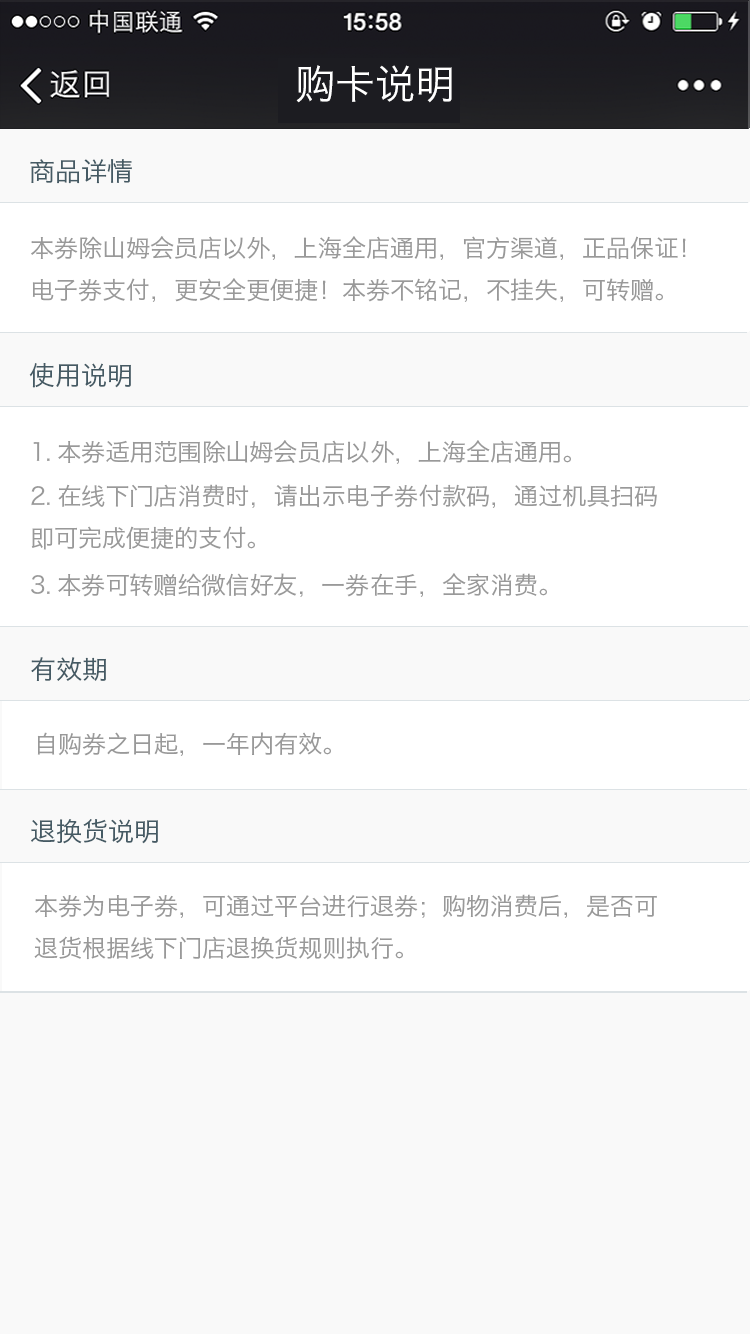
<style>
.page{position:relative;width:750px;height:1334px;background:#f9f9f9}
.page>*{position:absolute;margin:0}
.t1{font:40px "HiraginoSansGB-W3"}
.t2{font:24px/42px "HiraginoSansGB-W3"}
.t3{font:24px "HiraginoSansGB-W3"}
.t4{font:26px "HiraginoSansGB-W3"}
</style>
<div class="page">
<p class="t1" style="left:297px;top:64px;width:156px;height:38px">购卡说明</p>
<p class="t2" style="left:32px;top:235px;width:655px;height:66px">本券除山姆会员店以外，上海全店通用，官方渠道，正品保证！<br>电子券支付，更安全更便捷！本券不铭记，不挂失，可转赠。</p>
<p class="t3" style="left:34px;top:439px;width:538px;height:24px">1.本券适用范围除山姆会员店以外，上海全店通用。</p>
<p class="t3" style="left:32px;top:483px;width:626px;height:66px">2.在线下门店消费时，请出示电子券付款码，通过机具扫码<br>即可完成便捷的支付。</p>
<p class="t3" style="left:32px;top:572px;width:516px;height:24px">3.本券可转赠给微信好友，一券在手，全家消费。</p>
<p class="t4" style="left:32px;top:656px;width:75px;height:24px">有效期</p>
<p class="t3" style="left:38px;top:731px;width:294px;height:24px">自购券之日起，一年内有效。</p>
<p class="t3" style="left:35px;top:893px;width:623px;height:66px">本券为电子券，可通过平台进行退券；购物消费后，是否可<br>退货根据线下门店退换货规则执行。</p>
</div>
